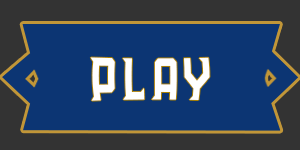
<style>
.page{position:relative;width:300px;height:150px;background:#0c3573}
.page>*{position:absolute;margin:0}
.t1{font:62.5px "Lorde-Havana";letter-spacing:0.1em;color:#ffffff;scale:0.75 1}
</style>
<div class="page">
<p class="t1" style="left:90px;top:57px;width:120px;height:44px">Play</p>
</div>
